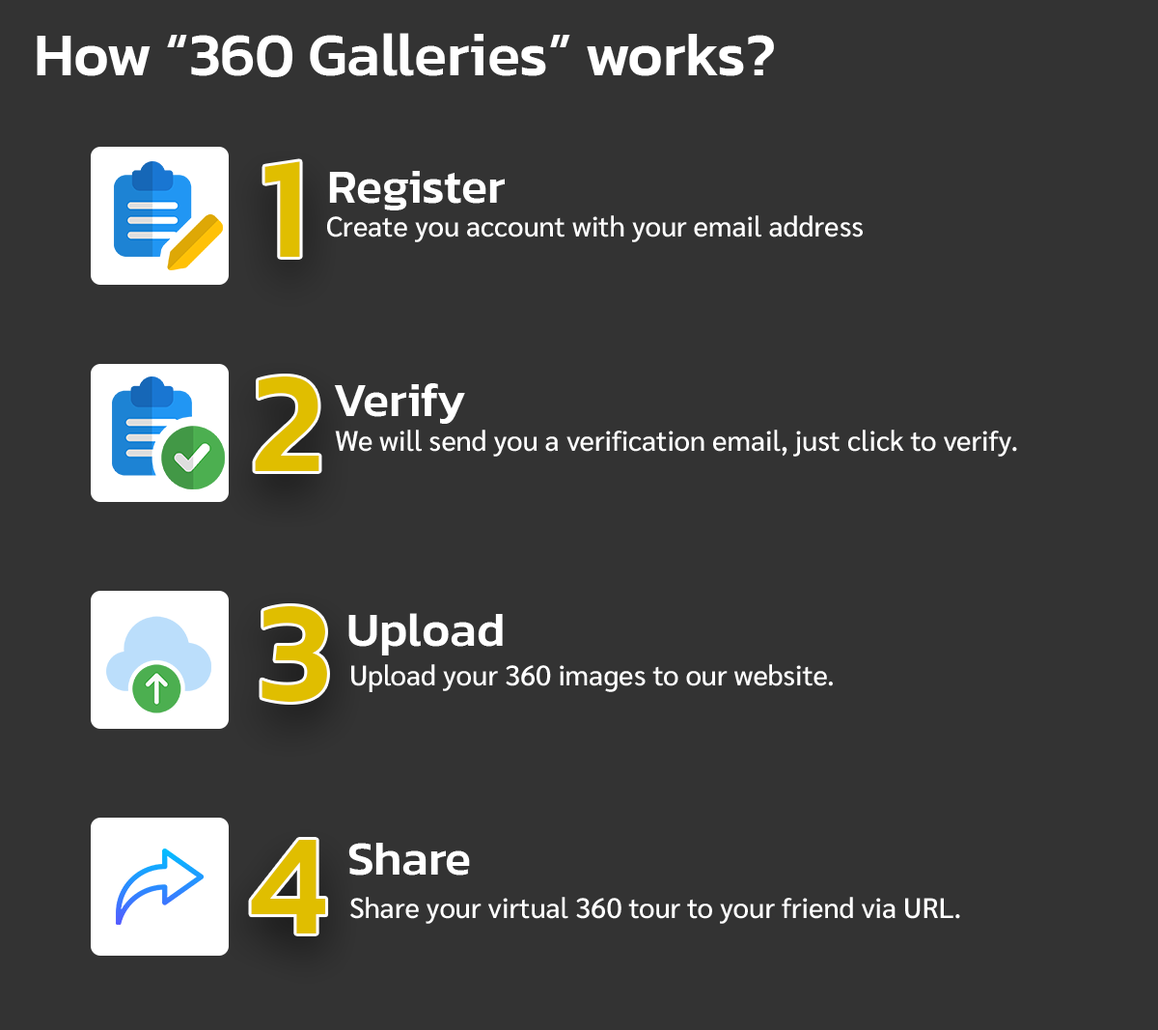
<style>
.page{position:relative;width:1158px;height:1030px;background:#333333}
.page>*{position:absolute;margin:0}
.t1{font:60.3px "Kanit-Medium";color:#ffffff}
.t2{font:144.8px "Kanit-Medium";color:#e0be00}
.t3{font:48.3px "Kanit-Medium";color:#ffffff}
.t4{font:28.1px "Sarabun-Medium";color:#ffffff}
</style>
<div class="page">
<p class="t1" style="left:37px;top:33px;width:737px;height:44px">How “360 Galleries” works?</p>
<p class="t2" style="left:264px;top:161px;width:36px;height:96px">1</p>
<p class="t3" style="left:329px;top:171px;width:176px;height:39px">Register</p>
<p class="t4" style="left:327px;top:215px;width:536px;height:27px">Create you account with your email address</p>
<p class="t2" style="left:255px;top:376px;width:64px;height:95px">2</p>
<p class="t3" style="left:334px;top:383px;width:131px;height:41px">Verify</p>
<p class="t4" style="left:335px;top:429px;width:682px;height:27px">We will send you a verification email, just click to verify.</p>
<p class="t2" style="left:262px;top:606px;width:65px;height:96px">3</p>
<p class="t3" style="left:348px;top:613px;width:155px;height:42px">Upload</p>
<p class="t4" style="left:351px;top:664px;width:482px;height:28px">Upload your 360 images to our website.</p>
<p class="t2" style="left:251px;top:840px;width:75px;height:93px">4</p>
<p class="t3" style="left:348px;top:842px;width:122px;height:33px">Share</p>
<p class="t4" style="left:350px;top:897px;width:610px;height:27px">Share your virtual 360 tour to your friend via URL.</p>
</div>
